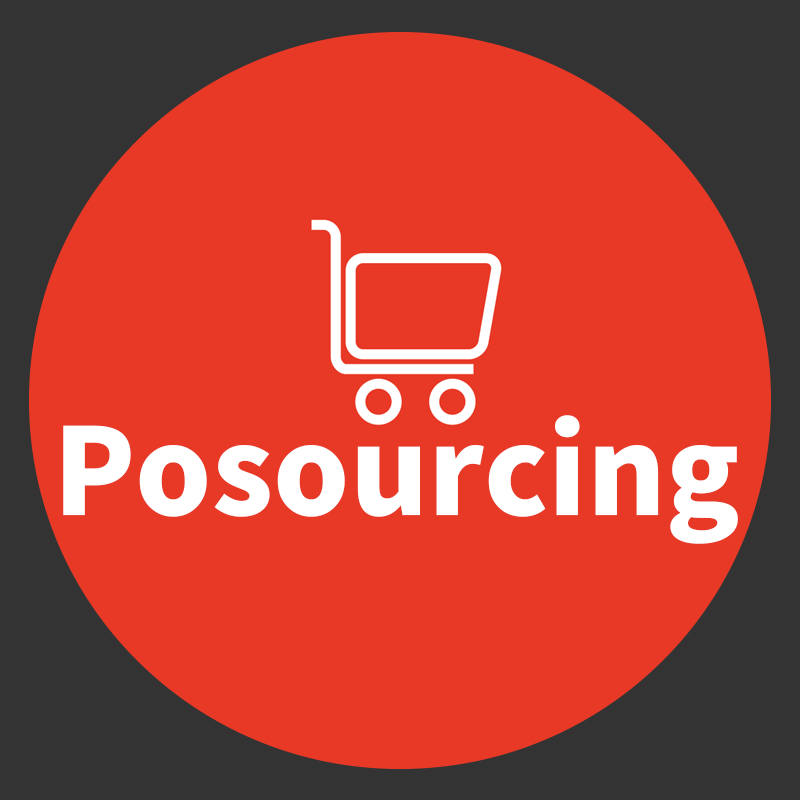
<style>
.page{position:relative;width:800px;height:800px;background:#e73926}
.page>*{position:absolute;margin:0}
.t1{font:120px "SourceHanSansK-Heavy";color:#ffffff}
</style>
<div class="page">
<p class="t1" style="left:63px;top:415px;width:675px;height:129px">Posourcing</p>
</div>
